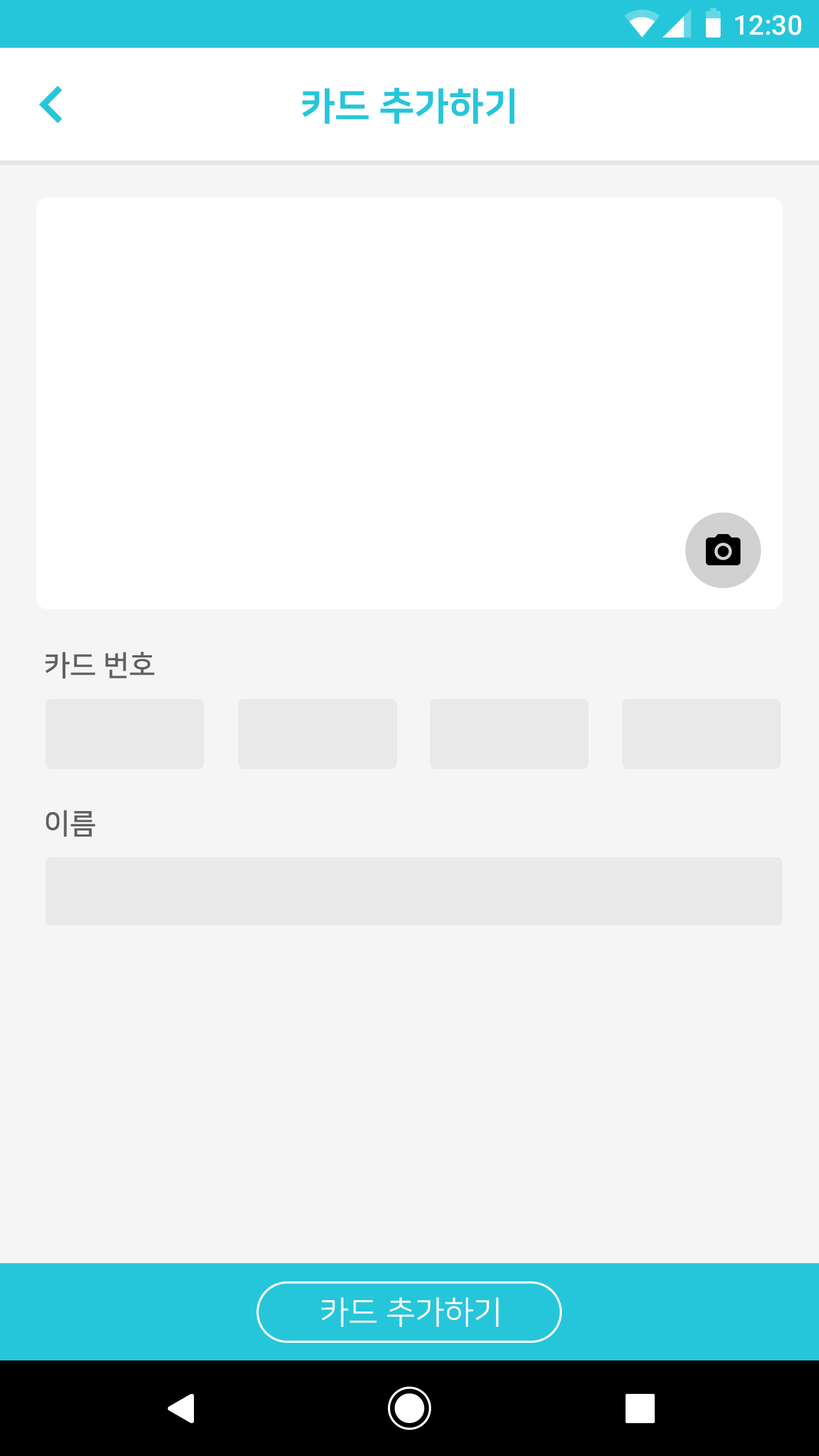
<style>
.page{position:relative;width:819px;height:1456px;background:#f5f5f5}
.page>*{position:absolute;margin:0}
.t1{font:27.3px "Roboto-Medium";color:#ffffff}
.t2{font:38.2px "NanumSquareEB";color:#26c6da}
.t3{font:28.7px "NanumSquareB";color:#616161}
.t4{font:31.9px "NanumSquareR";color:#ffffff}
</style>
<div class="page">
<p class="t1" style="left:735px;top:15px;width:66px;height:20px">12:30</p>
<p class="t2" style="left:302px;top:88px;width:213px;height:36px">카드 추가하기</p>
<p class="t3" style="left:45px;top:652px;width:110px;height:27px">카드 번호</p>
<p class="t3" style="left:46px;top:810px;width:50px;height:27px">이름</p>
<p class="t4" style="left:321px;top:1297px;width:178px;height:30px">카드 추가하기</p>
</div>
